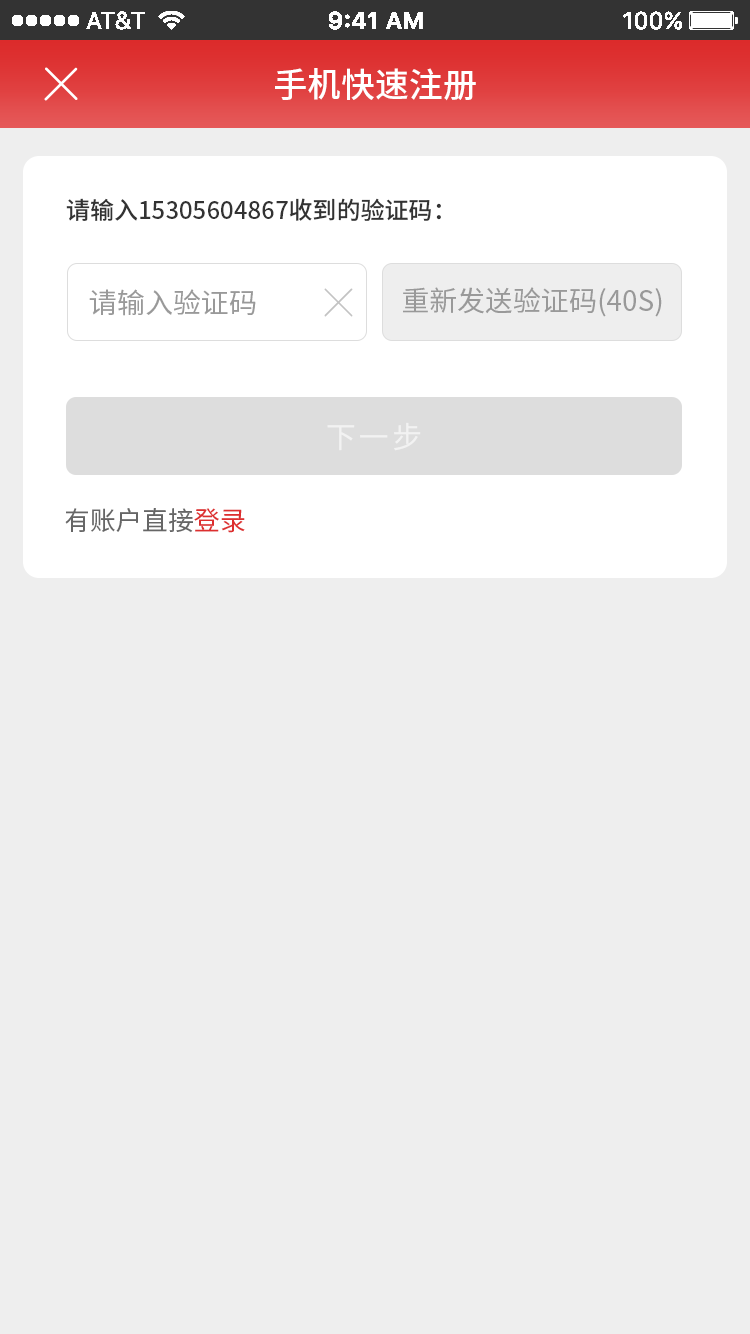
<style>
.page{position:relative;width:750px;height:1334px;background:#eeeeee}
.page>*{position:absolute;margin:0}
.t1{font:34px "SourceHanSansCN-Medium";color:#ffffff}
.t2{font:24px "SourceHanSansCN-Medium";color:#333333}
.t3{font:28px "SourceHanSansCN-Regular";color:#999999}
.t4{font:30px "SourceHanSansCN-Regular";letter-spacing:0.1em;color:#f2f2f2}
.t5{font:26px "SourceHanSansCN-Regular";color:#666666}
.t6{font:26px "SourceHanSansCN-Regular";color:#dd2f2f}
</style>
<div class="page">
<p class="t1" style="left:275px;top:68px;width:201px;height:33px">手机快速注册</p>
<p class="t2" style="left:66px;top:198px;width:375px;height:23px">请输入15305604867收到的验证码：</p>
<p class="t3" style="left:89px;top:289px;width:167px;height:27px">请输入验证码</p>
<p class="t3" style="left:403px;top:287px;width:259px;height:30px">重新发送验证码(40S)</p>
<p class="t4" style="left:327px;top:422px;width:94px;height:29px">下一步</p>
<p class="t5" style="left:65px;top:508px;width:180px;height:25px">有账户直接<span class="t6">登录</span></p>
</div>
